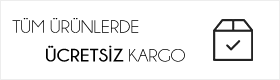
<style>
.page{position:relative;width:280px;height:80px;background:#ffffff}
.page>*{position:absolute;margin:0}
.t1{font:18px "Champagne&Limousines";color:#000000;scale:1.08 1}
.t2{font:18px "Champagne&Limousines-Bold";color:#000000;scale:1.08 1}
</style>
<div class="page">
<p class="t1" style="left:12px;top:18px;width:173px;height:44px">TÜM ÜRÜNLERDE<br> <span class="t2">ÜCRETSİZ</span> KARGO</p>
</div>
